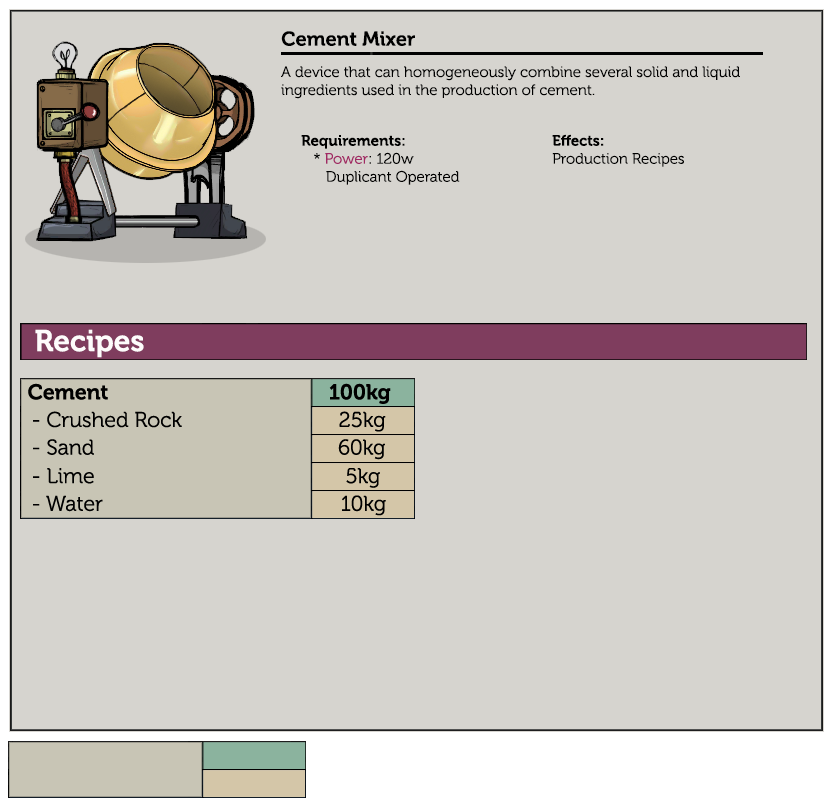
<style>
.page{position:relative;width:830px;height:810px;background:#d6d4cf}
.page>*{position:absolute;margin:0}
.t1{font:20px "Museo-700";color:#000000}
.t2{font:15px "Museo-300";color:#000000}
.t3{font:15px "Museo-700";color:#000000}
.t4{font:15px "Museo-300";color:#a12864}
</style>
<div class="page">
<p class="t1" style="left:281px;top:31px;width:134px;height:15px">Cement Mixer</p>
<p class="t2" style="left:281px;top:66px;width:459px;height:33px">A device that can homogeneously combine several solid and liquid ingredients used in the production of cement.</p>
<p class="t2" style="left:301px;top:135px;width:159px;height:50px"><span class="t3">Requirements:<br></span>   * <span class="t4">Power</span>: 120w<br>      Duplicant Operated</p>
<p class="t2" style="left:552px;top:134px;width:132px;height:33px"><span class="t3">Effects:</span><br>Production Recipes</p>
</div>
